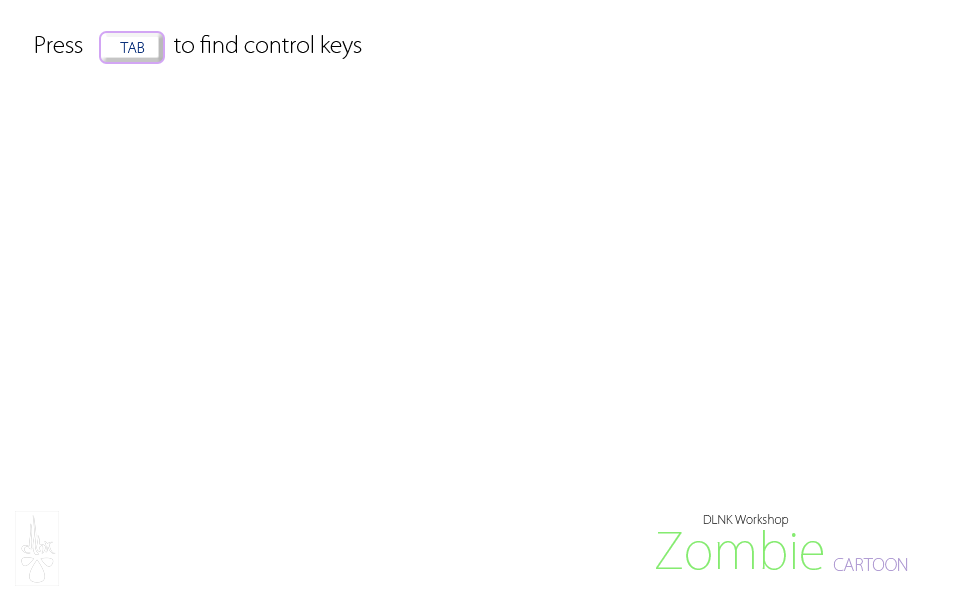
<style>
.page{position:relative;width:960px;height:600px;background:#ffffff}
.page>*{position:absolute;margin:0}
.t1{font:22.5px "KozGoPr6N-ExtraLight";color:#000000}
.t2{font:14.2px "KozGoPr6N-ExtraLight";color:#0c317b}
.t3{font:12px "KozGoPr6N-ExtraLight";color:#4a4a4a}
.t4{font:49.5px "KozGoPr6N-ExtraLight";color:#85eb70}
.t5{font:16.8px "KozGoPr6N-ExtraLight";color:#b29ed4}
</style>
<div class="page">
<p class="t1" style="left:35px;top:35px;width:327px;height:24px">Press   to find control keys</p>
<p class="t2" style="left:120px;top:42px;width:25px;height:11px">TAB</p>
<p class="t3" style="left:703px;top:514px;width:86px;height:13px">DLNK Workshop</p>
<p class="t4" style="left:656px;top:530px;width:167px;height:40px">Zombie</p>
<p class="t5" style="left:833px;top:558px;width:75px;height:13px">CARTOON</p>
</div>
